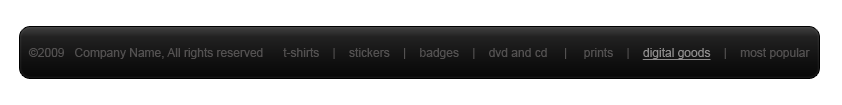
<style>
.page{position:relative;width:842px;height:105px;background:#ffffff}
.page>*{position:absolute;margin:0}
.t1{font:12px "ArialMT";color:#535151}
.t2{font:12px "ArialMT";color:#8e8c8c;text-decoration:underline}
</style>
<div class="page">
<p class="t1" style="left:28px;top:48px;width:782px;height:12px">©2009   Company Name, All rights reserved      t-shirts    |    stickers    |    badges    |    dvd and cd     |     prints    |    <span class="t2">digital goods</span>    |    most popular</p>
</div>
